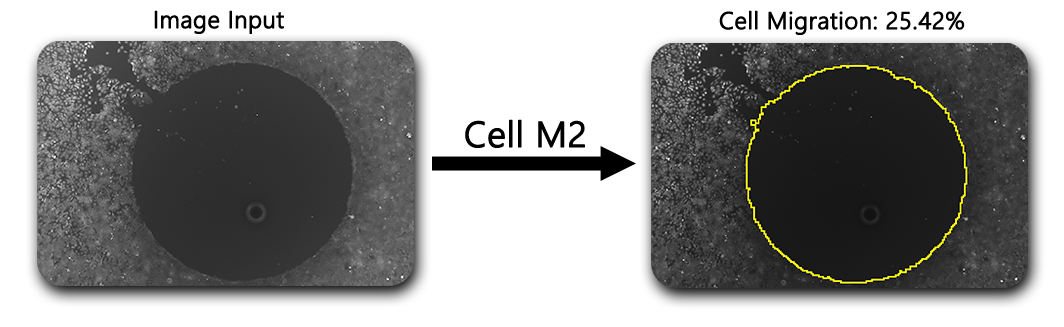
<style>
.page{position:relative;width:1064px;height:327px;background:#ffffff}
.page>*{position:absolute;margin:0}
.t1{font:24px "MicrosoftMHei";color:#000000;font-weight:bold}
.t2{font:36px "MicrosoftMHei";color:#000000;font-weight:bold}
</style>
<div class="page">
<p class="t1" style="left:154px;top:10px;width:130px;height:24px">Image Input</p>
<p class="t1" style="left:719px;top:10px;width:246px;height:25px">Cell Migration: 25.42%</p>
<p class="t2" style="left:465px;top:119px;width:120px;height:29px">Cell M2</p>
</div>
